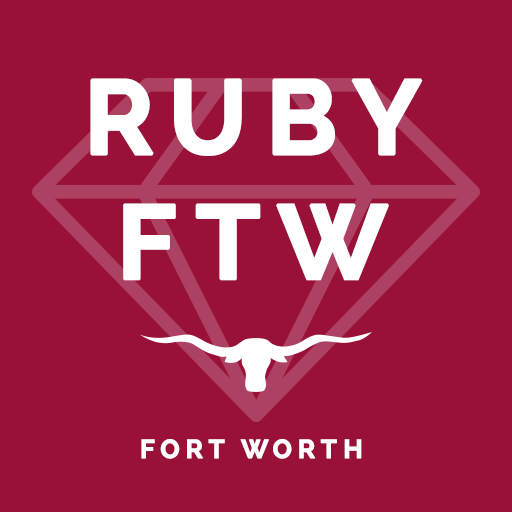
<style>
.page{position:relative;width:512px;height:512px;background:#991139}
.page>*{position:absolute;margin:0}
.t1{font:104.1px/124.9px "Raleway-Bold";letter-spacing:0.2em;color:#ffffff;font-weight:bold}
.t2{font:26px "Raleway-Bold";letter-spacing:0.2em;color:#ffffff;font-weight:bold}
</style>
<div class="page">
<p class="t1" style="left:90px;top:78px;width:333px;height:203px;text-align:center">RUBY<br>FTW</p>
<p class="t2" style="left:141px;top:439px;width:221px;height:20px">FORT WORTH</p>
</div>
